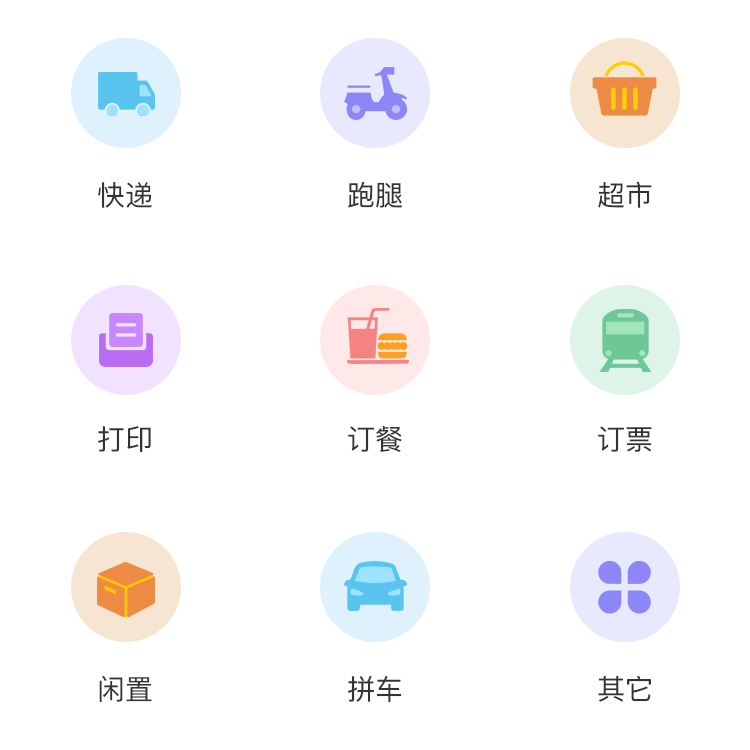
<style>
.page{position:relative;width:750px;height:750px;background:#ffffff}
.page>*{position:absolute;margin:0}
.t1{font:28px "PingFangSC-Regular";color:#333333}
</style>
<div class="page">
<p class="t1" style="left:98px;top:182px;width:54px;height:26px">快递</p>
<p class="t1" style="left:348px;top:181px;width:54px;height:27px">跑腿</p>
<p class="t1" style="left:598px;top:181px;width:54px;height:27px">超市</p>
<p class="t1" style="left:98px;top:426px;width:53px;height:26px">打印</p>
<p class="t1" style="left:348px;top:426px;width:54px;height:26px">订餐</p>
<p class="t1" style="left:598px;top:426px;width:54px;height:26px">订票</p>
<p class="t1" style="left:99px;top:675px;width:53px;height:27px">闲置</p>
<p class="t1" style="left:348px;top:675px;width:54px;height:28px">拼车</p>
<p class="t1" style="left:598px;top:675px;width:53px;height:27px">其它</p>
</div>
